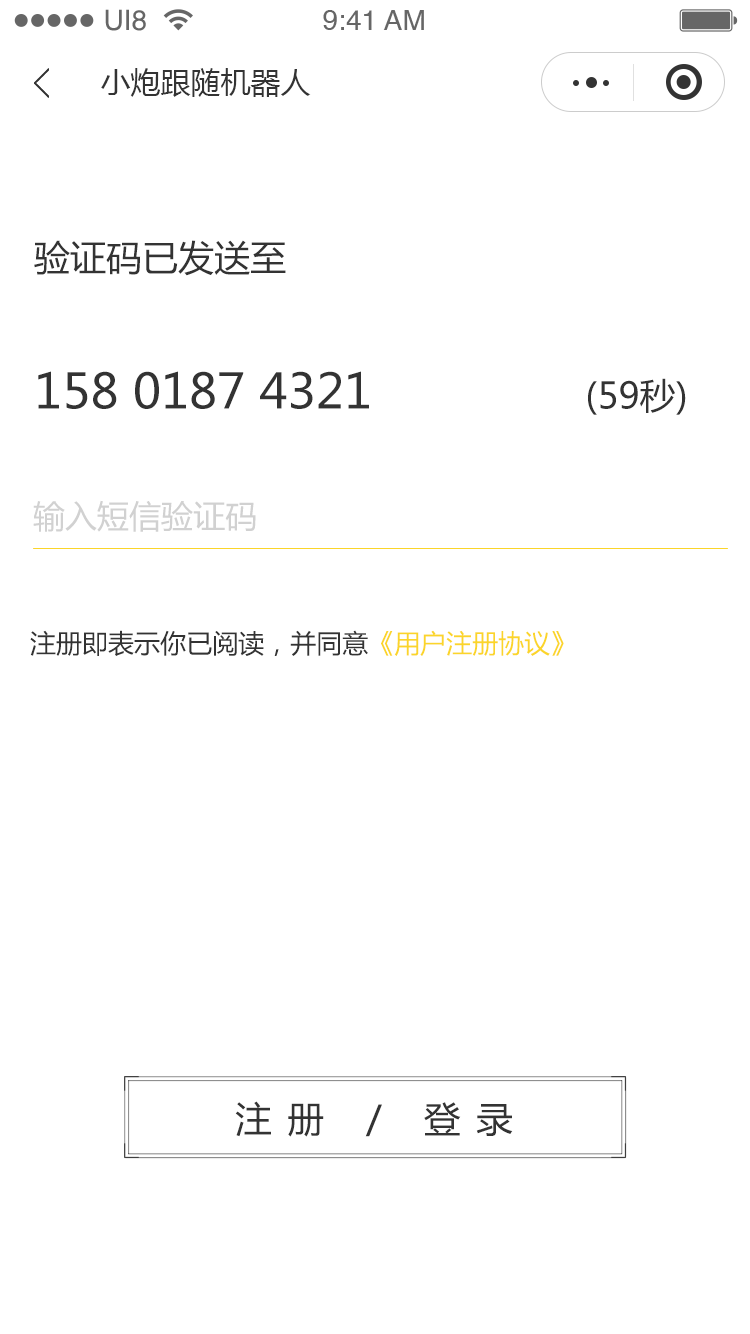
<style>
.page{position:relative;width:750px;height:1334px;background:#ffffff}
.page>*{position:absolute;margin:0}
.t1{font:28.1px "Helvetica";color:#666666}
.t2{font:30px "MicrosoftYaHei";color:#333333}
.t3{font:36px "MicrosoftYaHei";color:#333333}
.t4{font:48px "MicrosoftYaHei";color:#333333}
.t5{font:32px "MicrosoftYaHei";color:#d1d1d1}
.t6{font:26px "MicrosoftYaHei";color:#333333}
.t7{font:26px "MicrosoftYaHei";color:#fbd52a}
.t8{font:36px "MicrosoftYaHei";letter-spacing:0.44em;color:#333333}
</style>
<div class="page">
<p class="t1" style="left:105px;top:9px;width:41px;height:22px">UI8</p>
<p class="t1" style="left:323px;top:10px;width:101px;height:20px">9:41 AM</p>
<p class="t2" style="left:101px;top:68px;width:210px;height:29px">小炮跟随机器人</p>
<p class="t3" style="left:34px;top:240px;width:252px;height:36px">验证码已发送至</p>
<p class="t4" style="left:38px;top:371px;width:648px;height:44px">158 0187 4321               <span class="t3">(59秒)</span></p>
<p class="t5" style="left:33px;top:500px;width:223px;height:32px">输入短信验证码</p>
<p class="t6" style="left:30px;top:630px;width:534px;height:26px">注册即表示你已阅读，并同意<span class="t7">《用户注册协议》</span></p>
<p class="t8" style="left:235px;top:1101px;width:278px;height:36px">注册 / 登录</p>
</div>
